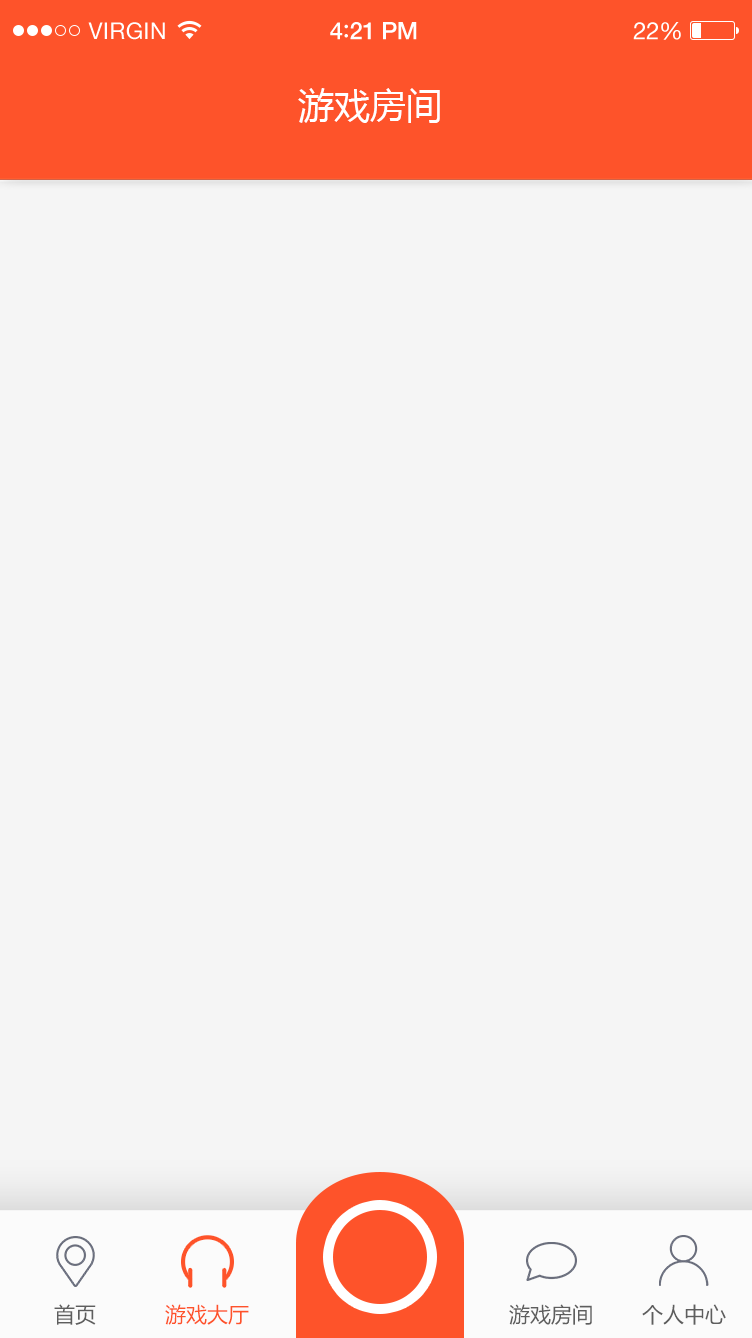
<style>
.page{position:relative;width:752px;height:1338px;background:#f5f5f5}
.page>*{position:absolute;margin:0}
.t1{font:23px "HelveticaNeue";letter-spacing:0.02em;color:#ffffff}
.t2{font:24px "HelveticaNeue-Medium";letter-spacing:-0.02em;color:#ffffff}
.t3{font:26px "Avenir-Medium";letter-spacing:-0.02em;color:#ffffff}
.t4{font:24px "HelveticaNeue";letter-spacing:-0.02em;color:#ffffff}
.t5{font:36px "MicrosoftYaHei";color:#ffffff}
.t6{font:21px "MicrosoftYaHei";color:#5e5e5e}
.t7{font:21px "MicrosoftYaHei";color:#fe532a}
</style>
<div class="page">
<p class="t1" style="left:88px;top:22px;width:77px;height:18px">VIRGIN</p>
<p class="t2" style="left:330px;top:22px;width:87px;height:18px">4<span class="t3">:</span>21 PM</p>
<p class="t4" style="left:633px;top:22px;width:48px;height:18px">22%</p>
<p class="t5" style="left:298px;top:88px;width:142px;height:35px">游戏房间</p>
<p class="t6" style="left:54px;top:1304px;width:42px;height:21px">首页</p>
<p class="t7" style="left:165px;top:1304px;width:84px;height:21px">游戏大厅</p>
<p class="t6" style="left:509px;top:1304px;width:83px;height:21px">游戏房间</p>
<p class="t6" style="left:642px;top:1304px;width:84px;height:21px">个人中心</p>
</div>
